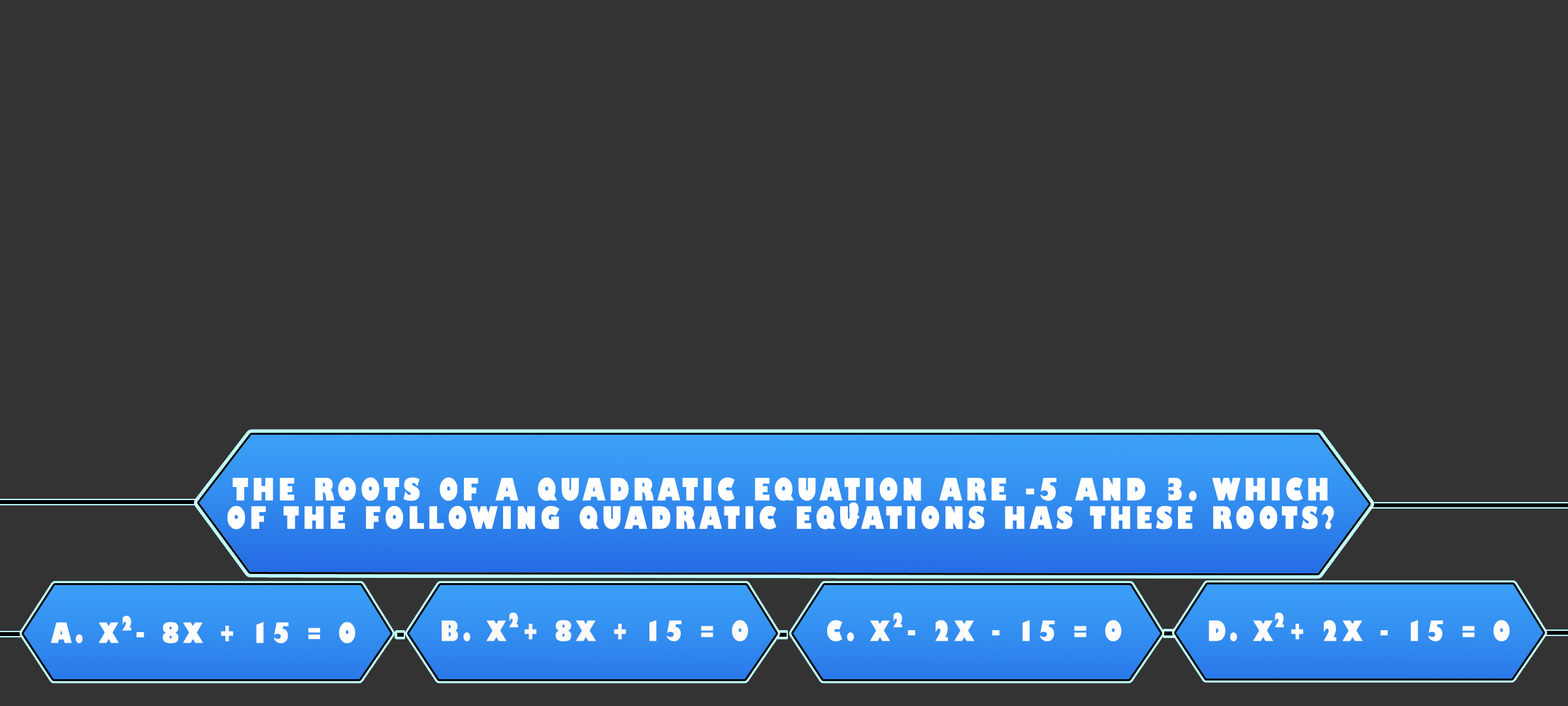
<style>
.page{position:relative;width:1568px;height:706px;background:#333333}
.page>*{position:absolute;margin:0}
.t1{font:30px/28.4px "GillSans-UltraBoldCondensed";letter-spacing:0.115em;color:#ffffff;text-transform:uppercase;scale:1.12 1}
.t2{font:21.1px "GillSans-UltraBoldCondensed";letter-spacing:0.115em;color:#ffffff;text-transform:uppercase;scale:1.11 1}
.t3{font:19.1px "GillSans-UltraBoldCondensed";letter-spacing:0.115em;color:#fdfdfd;text-transform:uppercase;scale:1.12 1}
.t4{font:27.2px "GillSans-UltraBoldCondensed";letter-spacing:0.115em;color:#fdfdfd;text-transform:uppercase;scale:1.12 1}
.t5{font:27.2px "GillSans-UltraBoldCondensed";letter-spacing:0.115em;color:#fcf9f9;text-transform:uppercase;scale:1.12 1}
.t6{font:27.2px "GillSans-UltraBoldCondensed";letter-spacing:0.115em;color:#fdfcfc;text-transform:uppercase;scale:1.12 1}
.t7{font:27.2px "GillSans-UltraBoldCondensed";letter-spacing:0.115em;color:#fffdfd;text-transform:uppercase;scale:1.12 1}
</style>
<div class="page">
<p class="t1" style="left:227px;top:477px;width:1107px;height:52px;text-align:center">The roots of a quadratic equation are -5 and 3. Which<br>of the following quadratic equations has these roots?</p>
<p class="t2" style="left:849px;top:502px;width:10px;height:17px">2</p>
<p class="t3" style="left:122px;top:615px;width:9px;height:15px">2</p>
<p class="t3" style="left:509px;top:612px;width:9px;height:15px">2</p>
<p class="t3" style="left:893px;top:612px;width:9px;height:15px">2</p>
<p class="t3" style="left:1275px;top:612px;width:9px;height:15px">2</p>
<p class="t4" style="left:51px;top:621px;width:304px;height:22px">A. x - 8x + 15 = 0</p>
<p class="t5" style="left:442px;top:619px;width:306px;height:22px">B. x + 8x + 15 = 0</p>
<p class="t6" style="left:827px;top:619px;width:295px;height:22px">C. x - 2x - 15 = 0</p>
<p class="t7" style="left:1209px;top:619px;width:301px;height:22px">D. x + 2x - 15 = 0</p>
</div>
